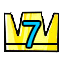
<style>
.page{position:relative;width:64px;height:64px;background:#ffffff}
.page>*{position:absolute;margin:0}
.t1{font:37.1px "SimHei";color:#00ccff}
</style>
<div class="page">
<p class="t1" style="left:23px;top:22px;width:17px;height:25px">7</p>
</div>
